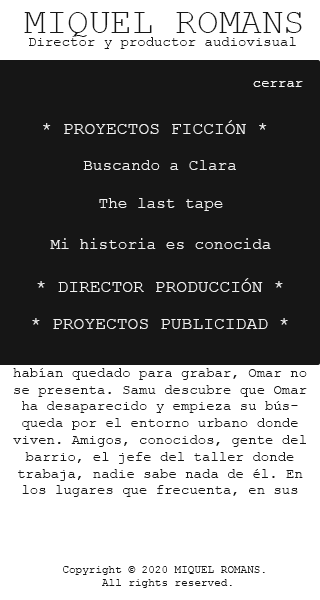
<style>
.page{position:relative;width:320px;height:600px;background:#161616}
.page>*{position:absolute;margin:0}
.t1{font:36px "CourierNewPSMT";color:#161616}
.t2{font:14px "CourierNewPSMT";color:#161616}
.t3{font:14px "CourierNewPSMT";color:#f6f6f6}
.t4{font:18px "CourierNewPSMT";color:#f1f1f1}
.t5{font:16px "CourierNewPSMT";color:#f1f1f1}
.t6{font:12px "CourierNewPSMT";color:#161616}
.t7{font:11px "CourierNewPSMT";color:#161616}
</style>
<div class="page">
<p class="t1" style="left:24px;top:12px;width:278px;height:25px">MIQUEL ROMANS</p>
<p class="t2" style="left:29px;top:37px;width:267px;height:12px">Director y productor audiovisual</p>
<p class="t3" style="left:253px;top:81px;width:50px;height:6px">cerrar</p>
<p class="t4" style="left:43px;top:120px;width:224px;height:14px">* PROYECTOS FICCIÓN *</p>
<p class="t5" style="left:83px;top:160px;width:153px;height:10px">Buscando a Clara</p>
<p class="t5" style="left:99px;top:198px;width:124px;height:13px">The last tape</p>
<p class="t5" style="left:50px;top:238px;width:221px;height:11px">Mi historia es conocida</p>
<p class="t4" style="left:37px;top:278px;width:246px;height:14px">* DIRECTOR PRODUCCIÓN *</p>
<p class="t2" style="left:13px;top:301px;width:294px;height:196px;text-align:center">El productor musical Samu va a producir la primera maqueta de rap de Omar Bachir, un joven rapero de Gambia. En su estudio, la noche que habían quedado para grabar, Omar no se presenta. Samu descubre que Omar ha desaparecido y empieza su búsqueda por el entorno urbano donde viven. Amigos, conocidos, gente del barrio, el jefe del taller donde trabaja, nadie sabe nada de él. En los lugares que frecuenta, en sus espacios, en la gente que le rodea: Omar ya no está. Mientras Samu intenta encontrar a Omar, irá descubriendo la verdadera historia de este joven rapero. Su pasado, pero también su presente y su futuro.<br><span class="t6"><br>Productora: Films de Orient</span></p>
<p class="t4" style="left:32px;top:318px;width:256px;height:11px">* PROYECTOS PUBLICIDAD *</p>
<p class="t7" style="left:63px;top:566px;width:202px;height:22px;text-align:center">Copyright © 2020 MIQUEL ROMANS. <br>All rights reserved.</p>
</div>
